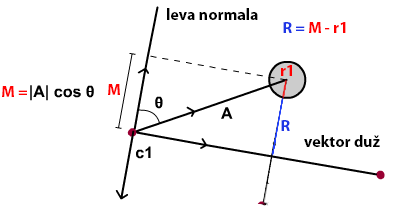
<style>
.page{position:relative;width:400px;height:220px;background:#ffffff}
.page>*{position:absolute;margin:0}
.t1{font:16px "MyriadPro-Bold";color:#000000}
.t2{font:16px "MyriadPro-Bold";color:#ff0000}
.t3{font:16px "MyriadPro-Bold";color:#1d35e6}
</style>
<div class="page">
<p class="t1" style="left:167px;top:8px;width:91px;height:12px">leva normala</p>
<p class="t2" style="left:283px;top:22px;width:63px;height:11px"><span class="t3">R = </span>M - r1</p>
<p class="t2" style="left:281px;top:65px;width:11px;height:11px">r1</p>
<p class="t2" style="left:2px;top:86px;width:25px;height:11px">M =</p>
<p class="t2" style="left:108px;top:84px;width:12px;height:11px">M</p>
<p class="t3" style="left:281px;top:120px;width:9px;height:11px">R</p>
<p class="t1" style="left:304px;top:135px;width:76px;height:12px">vektor duž</p>
</div>
